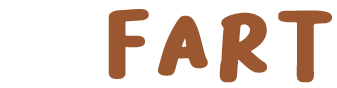
<style>
.page{position:relative;width:337px;height:88px;background:#ffffff}
.page>*{position:absolute;margin:0}
.t1{font:89px "BaksoSapi";color:#9b5830;font-weight:bold}
.t2{font:89px "BaksoSapi";color:#ffffff;font-weight:bold}
</style>
<div class="page">
<p class="t1" style="left:6px;top:5px;width:326px;height:78px"><span class="t2">IN</span>FART</p>
</div>
